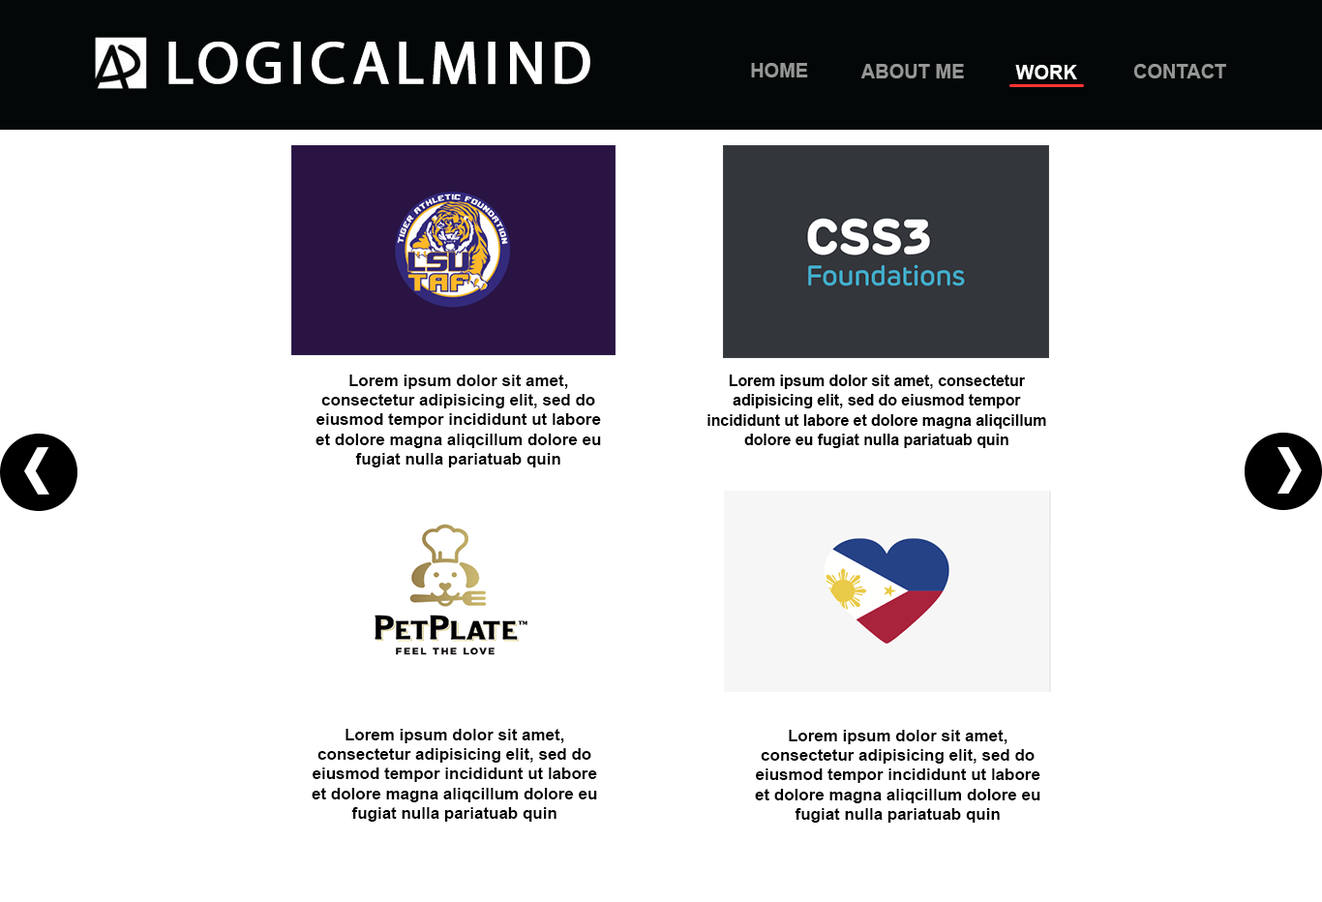
<style>
.page{position:relative;width:1322px;height:902px;background:#ffffff}
.page>*{position:absolute;margin:0}
.t1{font:60px "MyriadPro-Regular";letter-spacing:0.08em;color:#ffffff;font-weight:bold}
.t2{font:19.4px "Arial-BoldMT";color:#969696}
.t3{font:19.4px "Arial-BoldMT";color:#ffffff}
.t4{font:16.5px "Arial-BoldMT";color:#000000}
.t5{font:16.5px "Arial-BoldMT";color:#000000;scale:0.93 1}
</style>
<div class="page">
<p class="t1" style="left:168px;top:42px;width:422px;height:42px">LOGICALMIND</p>
<p class="t2" style="left:751px;top:63px;width:57px;height:14px">HOME</p>
<p class="t2" style="left:860px;top:64px;width:104px;height:14px">ABOUT ME</p>
<p class="t3" style="left:1015px;top:65px;width:62px;height:14px">WORK</p>
<p class="t2" style="left:1134px;top:64px;width:92px;height:14px">CONTACT</p>
<p class="t4" style="left:316px;top:375px;width:285px;height:92px;text-align:center">Lorem ipsum dolor sit amet, consectetur adipisicing elit, sed do eiusmod tempor incididunt ut labore et dolore magna aliqcillum dolore eu fugiat nulla pariatuab quin</p>
<p class="t5" style="left:707px;top:375px;width:339px;height:73px;text-align:center">Lorem ipsum dolor sit amet, consectetur adipisicing elit, sed do eiusmod tempor incididunt ut labore et dolore magna aliqcillum dolore eu fugiat nulla pariatuab quin</p>
<p class="t4" style="left:312px;top:729px;width:285px;height:93px;text-align:center">Lorem ipsum dolor sit amet, consectetur adipisicing elit, sed do eiusmod tempor incididunt ut labore et dolore magna aliqcillum dolore eu fugiat nulla pariatuab quin</p>
<p class="t4" style="left:755px;top:730px;width:285px;height:93px;text-align:center">Lorem ipsum dolor sit amet, consectetur adipisicing elit, sed do eiusmod tempor incididunt ut labore et dolore magna aliqcillum dolore eu fugiat nulla pariatuab quin</p>
</div>
